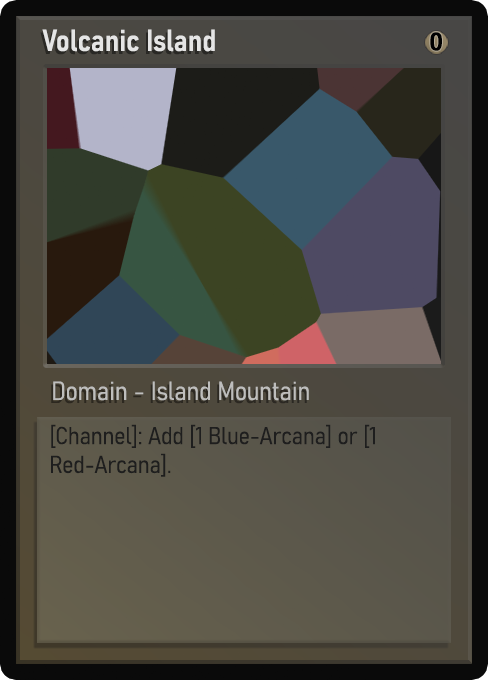
<style>
.page{position:relative;width:488px;height:680px}
.page>*{position:absolute;margin:0}
.t1{font:30px "Bahnschrift-SemiBoldSemiCondensed";color:#f2f2f2;font-weight:bold}
.t2{font:25px "WTRRoycroft";color:#000000;font-weight:bold;scale:1.09 1}
.t3{font:26px "Bahnschrift-LightSemiCondensed";color:#c8c8c8;font-weight:bold}
.t4{font:24px "Bahnschrift-LightSemiCondensed";color:#1e1e1e;font-weight:bold}
</style>
<div class="page">
<p class="t1" style="left:42px;top:29px;width:173px;height:23px;opacity:0.9">Volcanic Island</p>
<p class="t2" style="left:430px;top:32px;width:12px;height:19px">0</p>
<p class="t3" style="left:53px;top:381px;width:256px;height:20px;opacity:0.9">Domain - Island Mountain</p>
<p class="t4" style="left:51px;top:424px;width:324px;height:53px">[Channel]: Add [1 Blue-Arcana] or [1 Red-Arcana].</p>
</div>
